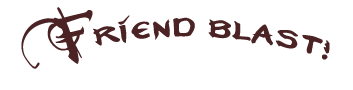
<style>
.page{position:relative;width:353px;height:90px;background:#ffffff}
.page>*{position:absolute;margin:0}
.t1{font:54.2px "NeverwinterNormal";color:#4b2325}
</style>
<div class="page">
<p class="t1" style="left:21px;top:7px;width:309px;height:62px;rotate:-1deg">Friend blast!</p>
</div>
